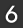
<style>
.page{position:relative;width:23px;height:28px;background:#333333}
.page>*{position:absolute;margin:0}
.t1{font:24px "Outfit-Regular";color:#ffffff;font-weight:bold;font-style:italic}
</style>
<div class="page">
<p class="t1" style="left:5px;top:5px;width:13px;height:18px">6</p>
</div>
